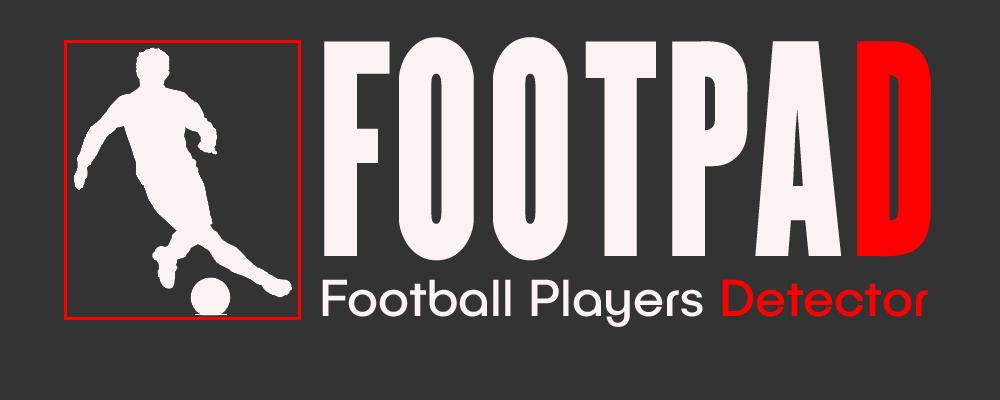
<style>
.page{position:relative;width:1000px;height:400px;background:#333333}
.page>*{position:absolute;margin:0}
.t1{font:265.1px "OPTIMorganOne";color:#fbf2f2}
.t2{font:265.1px "OPTIMorganOne";color:#ff0000}
.t3{font:52.2px "PublicaPlay-Regular";color:#fef3f3}
.t4{font:52.2px "PublicaPlay-Regular";color:#ff0000}
</style>
<div class="page">
<p class="t1" style="left:324px;top:37px;width:607px;height:224px">FOOTPA<span class="t2">D</span></p>
<p class="t3" style="left:322px;top:279px;width:606px;height:48px">Football Players<span class="t4"> Detector</span></p>
</div>
